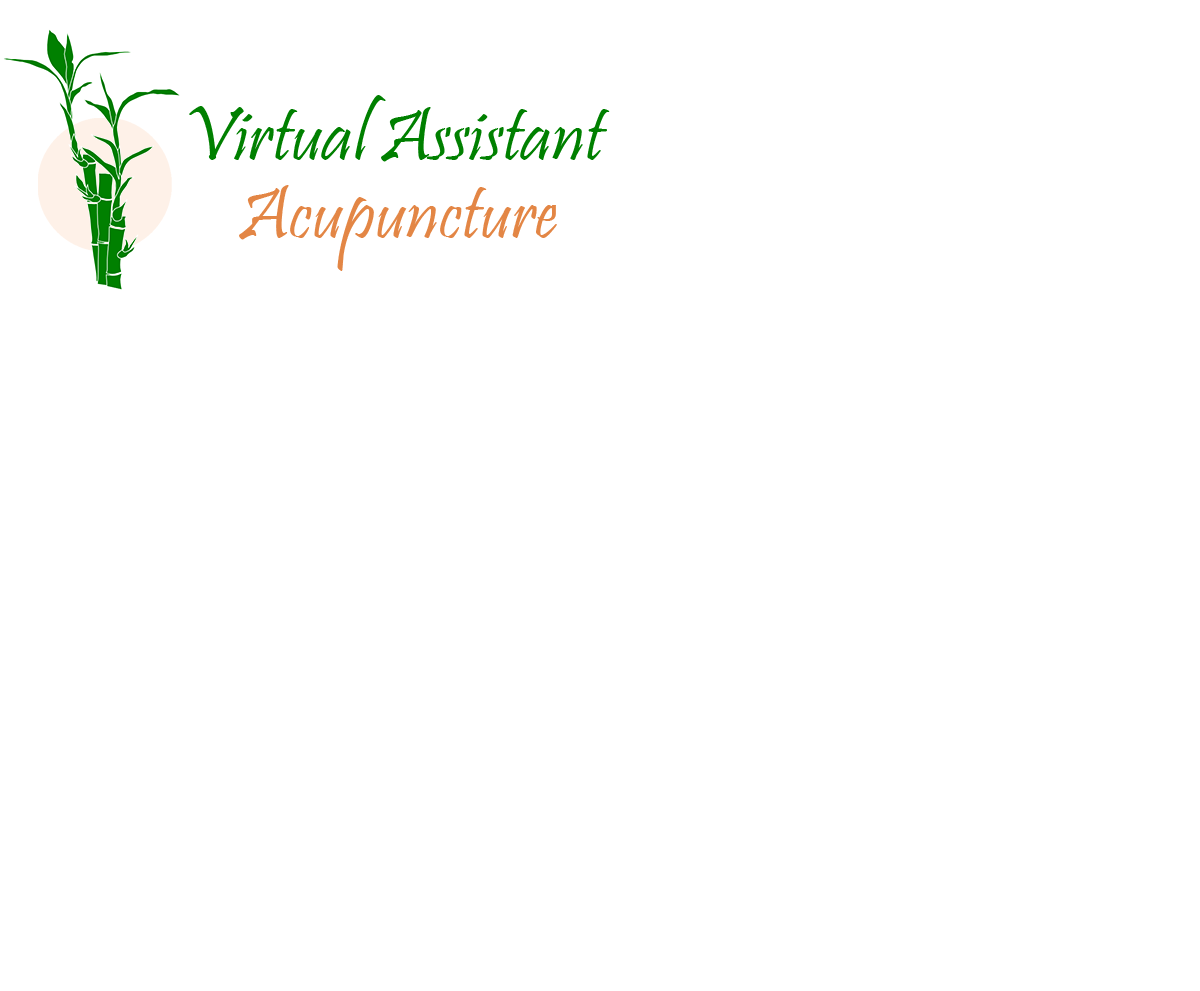
<style>
.page{position:relative;width:1200px;height:991px;background:#ffffff}
.page>*{position:absolute;margin:0}
.t1{font:78px "Pristina-Regular";color:#008000}
.t2{font:78px "Pristina-Regular";color:#e38645}
</style>
<div class="page">
<p class="t1" style="left:189px;top:95px;width:421px;height:67px">Virtual Assistant</p>
<p class="t2" style="left:239px;top:185px;width:318px;height:86px">Acupuncture</p>
</div>
